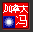
<style>
.page{position:relative;width:33px;height:32px;background:#f20000}
.page>*{position:absolute;margin:0}
.t1{font:10.4px "SimSun";letter-spacing:-0.25em;color:#ffffff}
.t2{font:11.7px "SimSun";color:#ffffff}
</style>
<div class="page">
<p class="t1" style="left:3px;top:4px;width:25px;height:9px">加拿大</p>
<p class="t2" style="left:16px;top:15px;width:11px;height:12px">冯</p>
</div>
